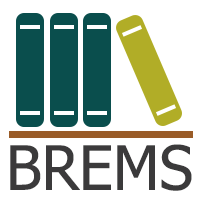
<style>
.page{position:relative;width:200px;height:200px;background:#ffffff}
.page>*{position:absolute;margin:0}
.t1{font:61.1px "Tahoma";color:#3b3a3b}
</style>
<div class="page">
<p class="t1" style="left:10px;top:144px;width:182px;height:47px">BREMS</p>
</div>
